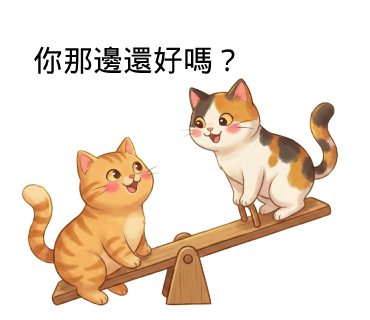
<style>
.page{position:relative;width:370px;height:320px;background:#ffffff}
.page>*{position:absolute;margin:0}
.t1{font:30px "DroidSansFallback";color:#000000}
</style>
<div class="page">
<p class="t1" style="left:34px;top:46px;width:201px;height:28px">你那邊還好嗎？</p>
</div>
